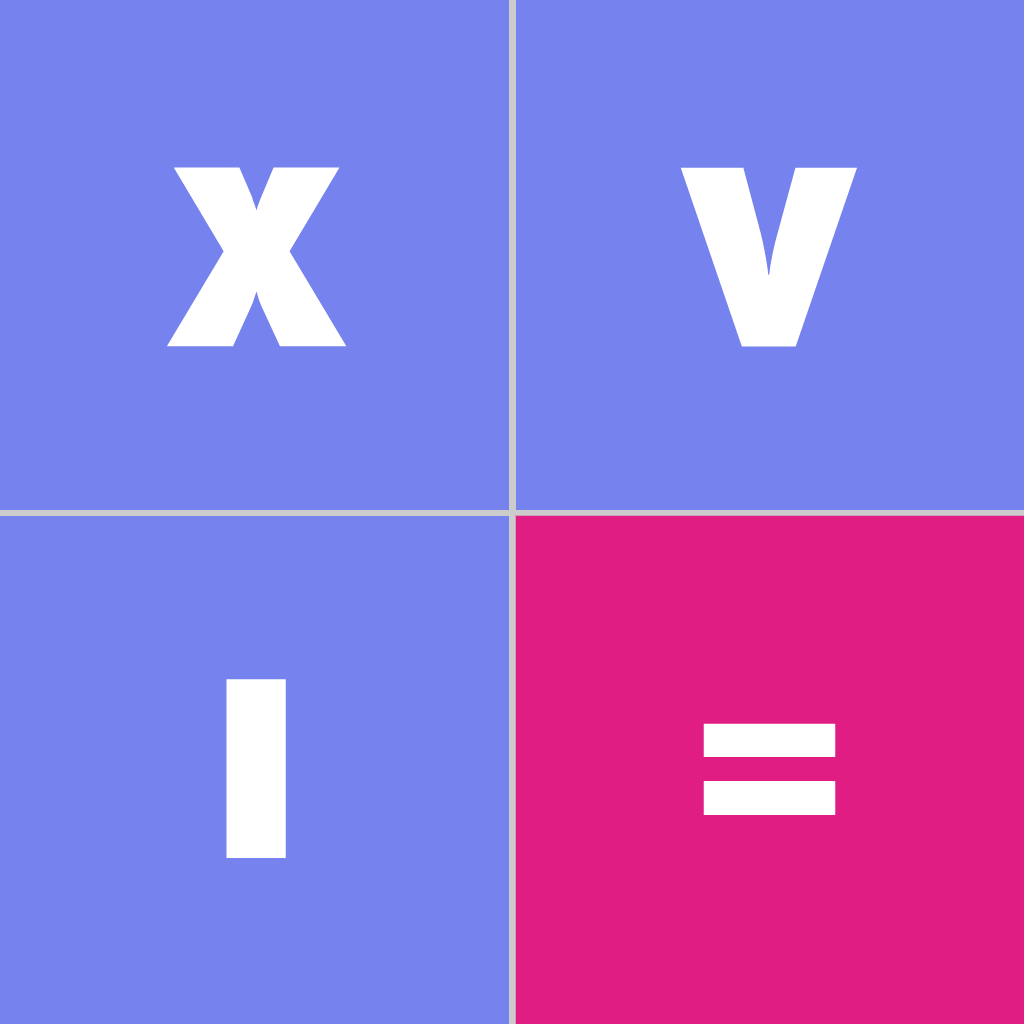
<style>
.page{position:relative;width:1024px;height:1024px;background:#7682ed}
.page>*{position:absolute;margin:0}
.t1{font:276.7px "Futura_Extra_Black-Normal";color:#ffffff;text-transform:uppercase;scale:0.9 1}
</style>
<div class="page">
<p class="t1" style="left:167px;top:167px;width:180px;height:180px">X</p>
<p class="t1" style="left:680px;top:167px;width:177px;height:180px">V</p>
<p class="t1" style="left:226px;top:679px;width:60px;height:179px">I</p>
<p class="t1" style="left:703px;top:723px;width:133px;height:92px">=</p>
</div>
